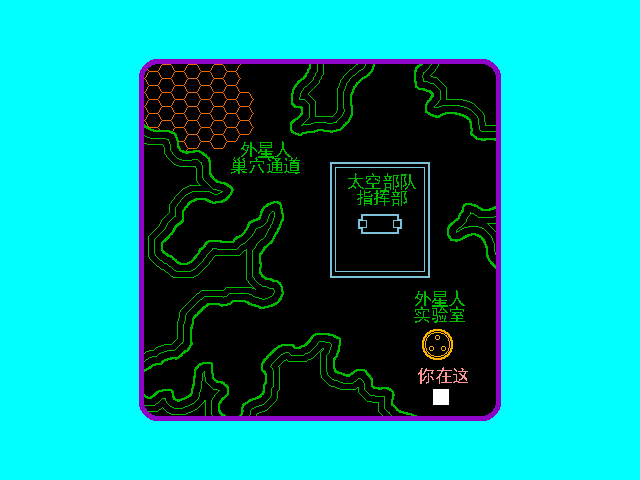
<style>
.page{position:relative;width:640px;height:480px;background:#00ffff}
.page>*{position:absolute;margin:0}
.t1{font:18px/16px "SimHei";color:#00bc00}
.t2{font:18px "SimHei";color:#ff9694}
</style>
<div class="page">
<p class="t1" style="left:231px;top:141px;width:69px;height:33px;text-align:center">外星人<br>巢穴通道</p>
<p class="t1" style="left:348px;top:173px;width:68px;height:33px;text-align:center">太空部队<br>指挥部</p>
<p class="t1" style="left:414px;top:290px;width:51px;height:33px;text-align:center">外星人<br>实验室</p>
<p class="t2" style="left:418px;top:367px;width:50px;height:17px">你在这</p>
</div>
